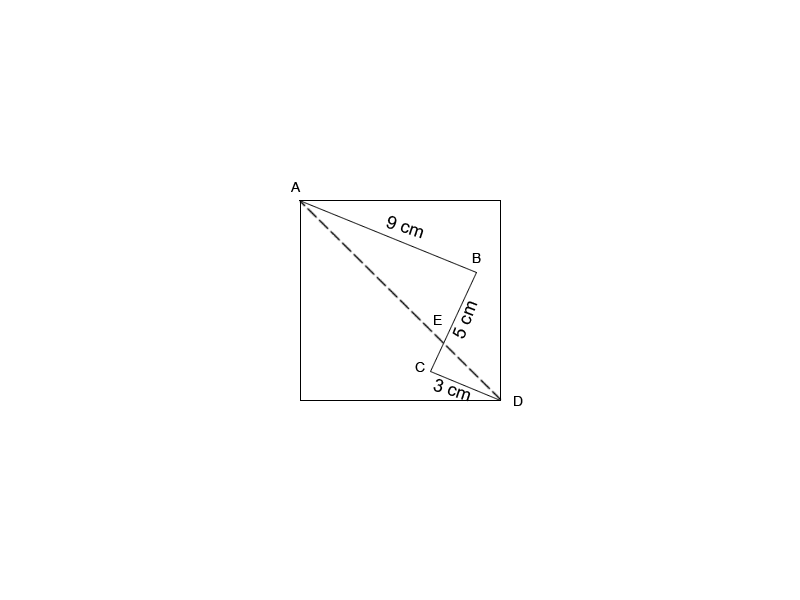
<style>
.page{position:relative;width:800px;height:600px;background:#ffffff}
.page>*{position:absolute;margin:0}
.t1{font:14px "ArialMT";color:#000000}
.t2{font:18px "ArialMT";color:#000000}
</style>
<div class="page">
<p class="t1" style="left:291px;top:182px;width:10px;height:10px">A</p>
<p class="t2" style="left:386px;top:215px;width:38px;height:24px;rotate:18deg">9 cm</p>
<p class="t1" style="left:472px;top:253px;width:9px;height:10px">B</p>
<p class="t2" style="left:452px;top:301px;width:26px;height:38px;rotate:-69deg">5 cm</p>
<p class="t1" style="left:434px;top:315px;width:8px;height:10px">E</p>
<p class="t1" style="left:415px;top:362px;width:10px;height:10px">C</p>
<p class="t2" style="left:433px;top:378px;width:38px;height:24px;rotate:18deg">3 cm</p>
<p class="t1" style="left:514px;top:396px;width:9px;height:10px">D</p>
</div>
